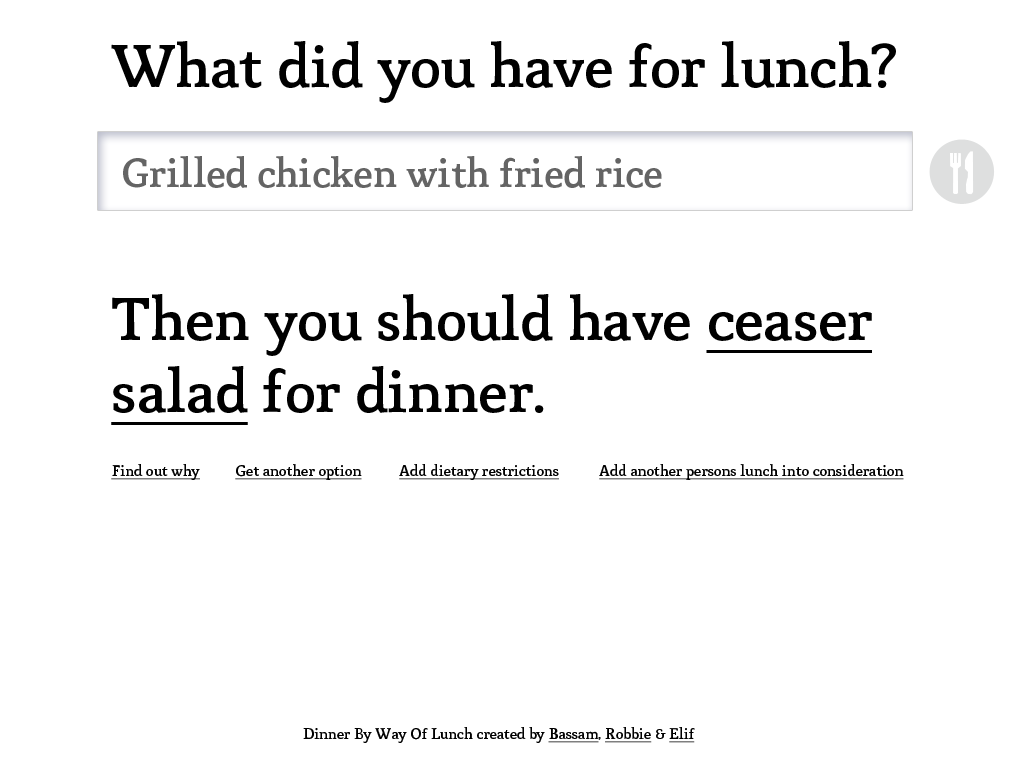
<style>
.page{position:relative;width:1024px;height:768px;background:#ffffff}
.page>*{position:absolute;margin:0}
.t1{font:60px "Mido-Medium";letter-spacing:-0.015em;color:#000000}
.t2{font:40px "Mido-Medium";letter-spacing:-0.015em;color:#646464}
.t3{font:60px "Mido-Medium";letter-spacing:-0.015em;color:#000000;text-decoration:underline}
.t4{font:15px "Mido-Medium";letter-spacing:-0.015em;color:#000000;text-decoration:underline}
.t5{font:15px "Mido-Medium";letter-spacing:-0.015em;color:#000000}
</style>
<div class="page">
<p class="t1" style="left:111px;top:41px;width:785px;height:62px">What did you have for lunch?</p>
<p class="t2" style="left:123px;top:156px;width:539px;height:32px">Grilled chicken with fried rice</p>
<p class="t1" style="left:111px;top:294px;width:761px;height:131px">Then you should have <span class="t3">ceaser salad</span> for dinner.</p>
<p class="t4" style="left:111px;top:464px;width:89px;height:16px">Find out why</p>
<p class="t4" style="left:235px;top:464px;width:127px;height:16px">Get another option</p>
<p class="t4" style="left:399px;top:464px;width:160px;height:16px">Add dietary restrictions</p>
<p class="t4" style="left:599px;top:464px;width:305px;height:16px">Add another persons lunch into consideration</p>
<p class="t5" style="left:303px;top:727px;width:392px;height:16px">Dinner By Way Of Lunch created by <span class="t4">Bassam</span>, <span class="t4">Robbie</span> &amp; <span class="t4">Elif</span></p>
</div>
